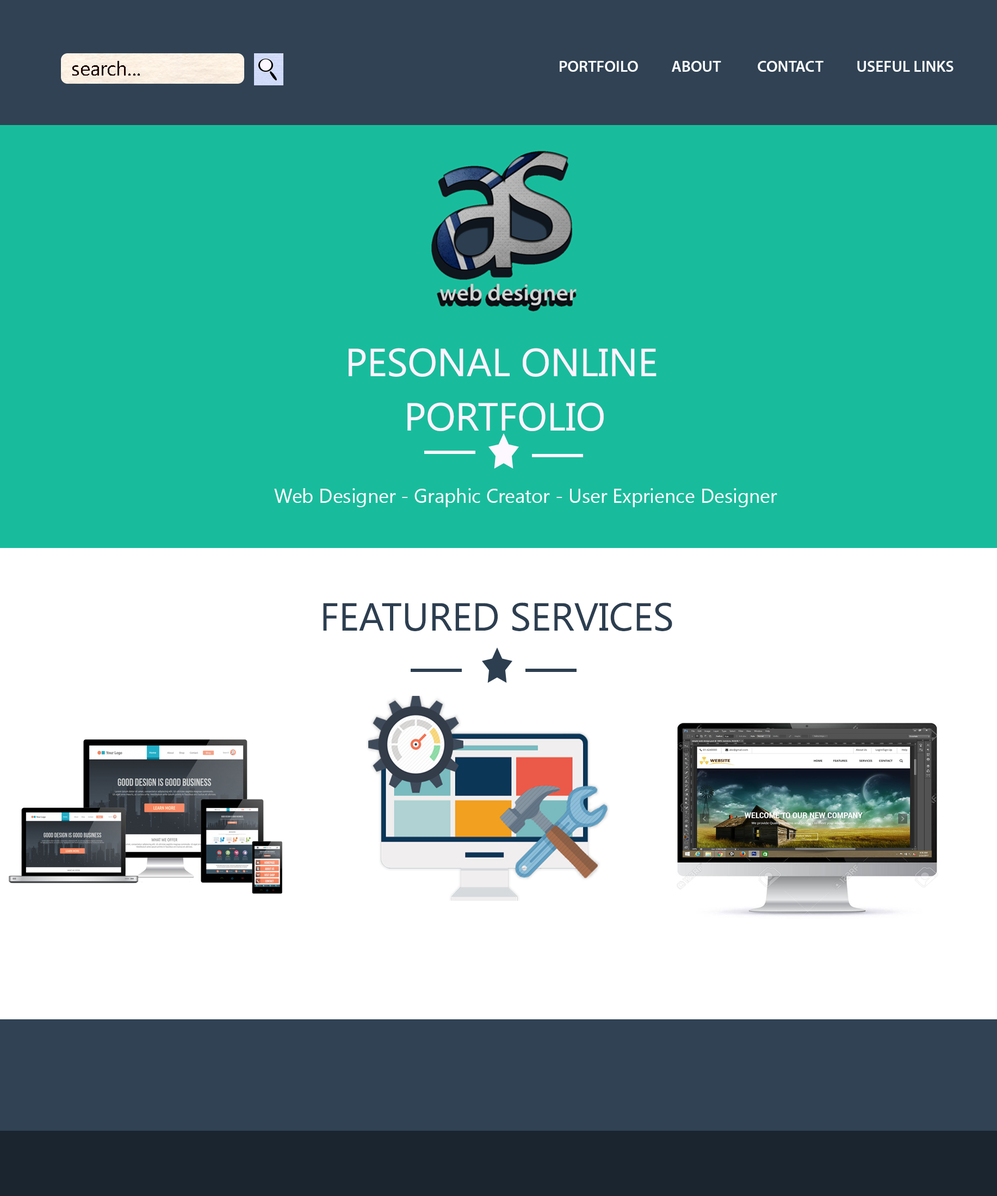
<style>
.page{position:relative;width:997px;height:1196px;background:#ffffff}
.page>*{position:absolute;margin:0}
.t1{font:19.9px "SegoeUISymbol";color:#1c0000}
.t2{font:16px "MyriadPro-Semibold";color:#1c0000}
.t3{font:16px "MyriadPro-Semibold";color:#fafcfe}
.t4{font:39.2px "SegoeUISymbol";color:#fff2ff}
.t5{font:19.6px "SegoeUISymbol";color:#fafcfe}
.t6{font:26.1px "SegoeUISymbol";color:#fafcfe}
.t7{font:39.2px "SegoeUISymbol";color:#2c3e50}
</style>
<div class="page">
<p class="t1" style="left:72px;top:61px;width:68px;height:15px"><span class="t2">   </span>search...</p>
<p class="t3" style="left:560px;top:61px;width:393px;height:11px">PORTFOILO          ABOUT           CONTACT          USEFUL LINKS</p>
<p class="t4" style="left:349px;top:348px;width:307px;height:29px">PESONAL ONLINE</p>
<p class="t4" style="left:407px;top:402px;width:197px;height:29px">PORTFOLIO</p>
<p class="t5" style="left:274px;top:488px;width:503px;height:19px"><span class="t6">                      </span>Web Designer - Graphic Creator - User Exprience Designer</p>
<p class="t7" style="left:323px;top:603px;width:349px;height:28px">FEATURED SERVICES</p>
</div>
